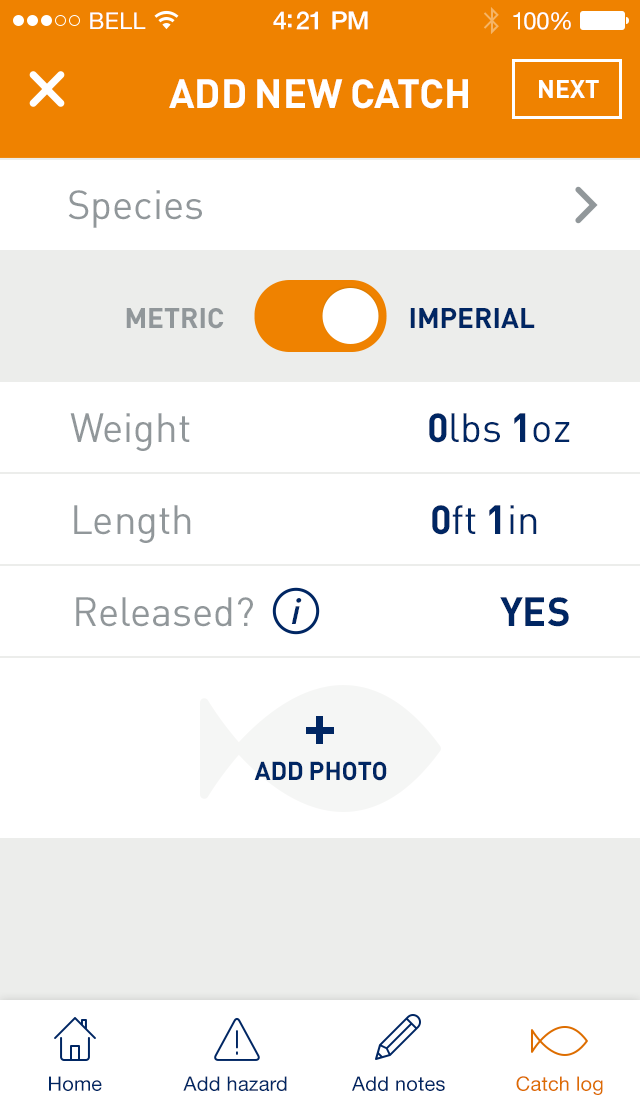
<style>
.page{position:relative;width:640px;height:1098px;background:#ffffff}
.page>*{position:absolute;margin:0}
.t1{font:23px "HelveticaNeue";letter-spacing:0.02em;color:#ffffff}
.t2{font:25px "HelveticaNeue-Medium";letter-spacing:-0.02em;color:#ffffff}
.t3{font:24px "HelveticaNeue";letter-spacing:-0.02em;color:#ffffff}
.t4{font:40px "DIN-Bold";color:#ffffff;text-transform:uppercase}
.t5{font:25px "DIN-Bold";color:#ffffff;text-transform:uppercase}
.t6{font:40px "DIN-Regular";color:#91979a}
.t7{font:28px "DIN-Bold";color:#91979a;text-transform:uppercase}
.t8{font:28px "DIN-Bold";color:#002663;text-transform:uppercase}
.t9{font:40px "DIN-Regular";color:#002663}
.t10{font:40px "DIN-Bold";color:#002663}
.t11{font:37.7px "Bliss2-MediumItalic";color:#002663}
.t12{font:25.3px "DIN-Bold";color:#002663;text-transform:uppercase}
.t13{font:20px "HelveticaNeue";letter-spacing:0.01em;color:#002663}
.t14{font:20px "HelveticaNeue";letter-spacing:0.01em;color:#dd6d00}
</style>
<div class="page">
<p class="t1" style="left:90px;top:12px;width:56px;height:17px">BELL</p>
<p class="t2" style="left:273px;top:11px;width:95px;height:19px">4:21 PM</p>
<p class="t3" style="left:513px;top:12px;width:58px;height:18px">100%</p>
<p class="t4" style="left:169px;top:79px;width:299px;height:30px">add new catch</p>
<p class="t5" style="left:539px;top:80px;width:60px;height:18px">next</p>
<p class="t6" style="left:68px;top:190px;width:134px;height:38px">Species</p>
<p class="t7" style="left:126px;top:308px;width:98px;height:21px">metric</p>
<p class="t8" style="left:410px;top:308px;width:125px;height:20px">Imperial</p>
<p class="t6" style="left:70px;top:413px;width:120px;height:38px">Weight</p>
<p class="t9" style="left:429px;top:413px;width:141px;height:30px"><span class="t10">0</span>lbs <span class="t10">1</span>oz</p>
<p class="t6" style="left:74px;top:505px;width:117px;height:38px">Length</p>
<p class="t9" style="left:432px;top:505px;width:105px;height:30px"><span class="t10">0</span>ft <span class="t10">1</span>in</p>
<p class="t6" style="left:76px;top:597px;width:177px;height:30px">Released?</p>
<p class="t11" style="left:291px;top:598px;width:11px;height:26px">i</p>
<p class="t10" style="left:500px;top:597px;width:69px;height:30px">YES</p>
<p class="t12" style="left:254px;top:761px;width:133px;height:20px">Add photo</p>
<p class="t13" style="left:49px;top:1076px;width:53px;height:15px">Home</p>
<p class="t13" style="left:183px;top:1076px;width:104px;height:15px">Add hazard</p>
<p class="t13" style="left:352px;top:1076px;width:93px;height:15px">Add notes</p>
<p class="t14" style="left:516px;top:1076px;width:87px;height:19px">Catch log</p>
</div>
